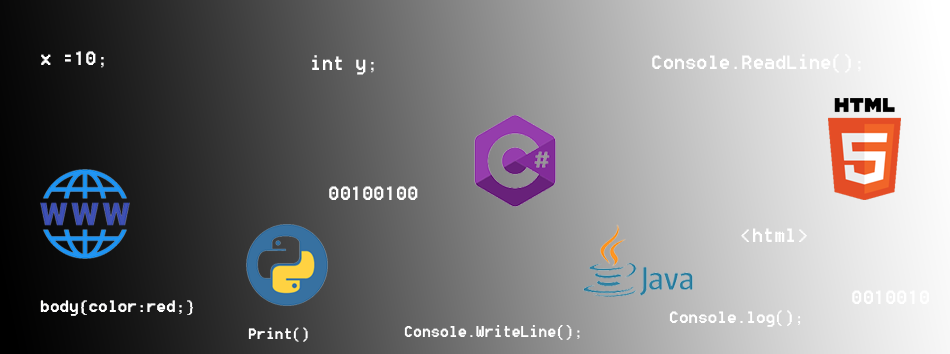
<style>
.page{position:relative;width:950px;height:354px}
.page>*{position:absolute;margin:0}
.t1{font:24px "8514oem";color:#ffffff}
.t2{font:20.3px "8514oem";color:#ffffff}
.t3{font:18.6px "8514oem";color:#ffffff}
.t4{font:19.5px "8514oem";color:#ffffff}
</style>
<div class="page">
<p class="t1" style="left:41px;top:51px;width:63px;height:17px">x =10;</p>
<p class="t1" style="left:652px;top:54px;width:209px;height:19px">Console.ReadLine();</p>
<p class="t1" style="left:312px;top:55px;width:62px;height:20px">int y;</p>
<p class="t1" style="left:329px;top:186px;width:89px;height:14px">00100100</p>
<p class="t1" style="left:741px;top:228px;width:66px;height:14px">&lt;html&gt;</p>
<p class="t1" style="left:852px;top:290px;width:77px;height:14px">0010010</p>
<p class="t2" style="left:40px;top:300px;width:153px;height:16px">body{color:red;}</p>
<p class="t2" style="left:669px;top:310px;width:132px;height:17px">Console.log();</p>
<p class="t3" style="left:248px;top:327px;width:60px;height:15px">Print()</p>
<p class="t4" style="left:404px;top:325px;width:176px;height:15px">Console.WriteLine();</p>
</div>
